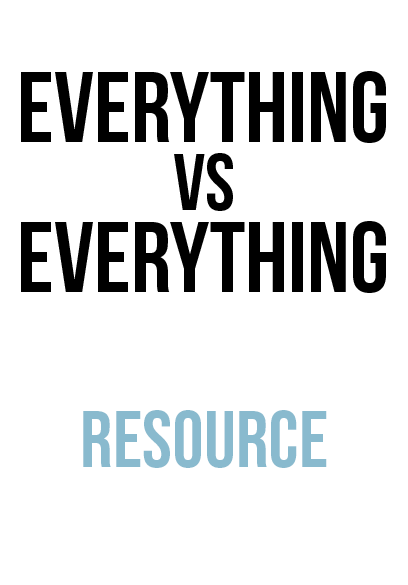
<style>
.page{position:relative;width:408px;height:585px;background:#ffffff}
.page>*{position:absolute;margin:0}
.t1{font:100px "BebasNeue";color:#000000}
.t2{font:80px "BebasNeue";color:#000000}
.t3{font:80px "BebasNeue-Regular";color:#89bace}
</style>
<div class="page">
<p class="t1" style="left:21px;top:71px;width:365px;height:72px">everything</p>
<p class="t2" style="left:174px;top:153px;width:59px;height:58px">vs</p>
<p class="t1" style="left:21px;top:221px;width:365px;height:72px">everything</p>
<p class="t3" style="left:83px;top:410px;width:244px;height:58px">resource</p>
</div>
